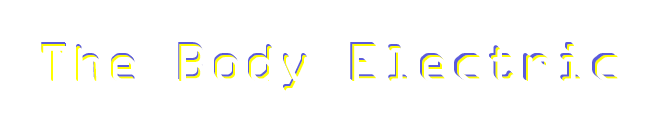
<style>
.page{position:relative;width:660px;height:130px;background:#ffffff}
.page>*{position:absolute;margin:0}
.t1{font:47.8px "OCRAStd"}
.t2{font:48px "OCRAStd"}
</style>
<div class="page">
<p class="t1" style="left:41px;top:42px;width:574px;height:47px">The Body Electric</p>
<p class="t2" style="left:41px;top:44px;width:577px;height:47px">The Body Electric</p>
<p class="t1" style="left:42px;top:43px;width:574px;height:47px">The Body Electric</p>
</div>
